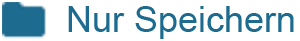
<style>
.page{position:relative;width:300px;height:41px;background:#ffffff}
.page>*{position:absolute;margin:0}
.t1{font:36px "ArialMT";color:#1d6b8f}
</style>
<div class="page">
<p class="t1" style="left:68px;top:6px;width:226px;height:33px">Nur Speichern</p>
</div>
